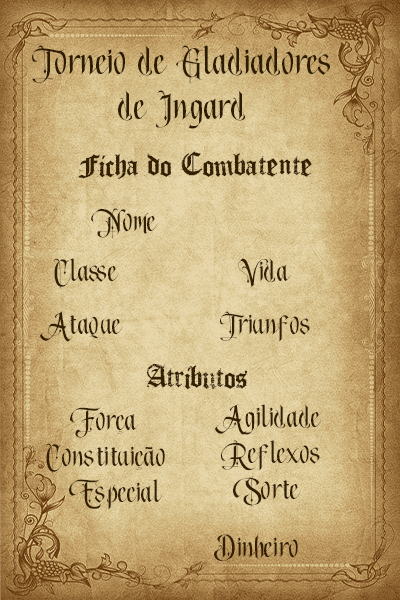
<style>
.page{position:relative;width:400px;height:600px}
.page>*{position:absolute;margin:0}
.t1{font:38px "Songofcoronos";color:#2e1c01}
.t2{font:30px "Faith-Collapsing";color:#342000}
.t3{font:30px "Songofcoronos";color:#342000}
</style>
<div class="page">
<p class="t1" style="left:32px;top:45px;width:298px;height:84px;text-align:center">Torneio de Gladiadores de Ingard</p>
<p class="t2" style="left:78px;top:151px;width:234px;height:28px">Ficha do Combatente</p>
<p class="t3" style="left:91px;top:208px;width:67px;height:31px">Nome</p>
<p class="t3" style="left:54px;top:258px;width:65px;height:31px">Classe</p>
<p class="t3" style="left:238px;top:258px;width:53px;height:30px">Vida</p>
<p class="t3" style="left:40px;top:311px;width:83px;height:31px">Ataque</p>
<p class="t3" style="left:220px;top:311px;width:90px;height:31px">Triunfos</p>
<p class="t2" style="left:145px;top:363px;width:103px;height:27px">Atributos</p>
<p class="t3" style="left:70px;top:407px;width:69px;height:31px">Força</p>
<p class="t3" style="left:215px;top:404px;width:107px;height:31px">Agilidade</p>
<p class="t3" style="left:46px;top:443px;width:119px;height:31px">Constituição</p>
<p class="t3" style="left:221px;top:440px;width:99px;height:31px">Reflexos</p>
<p class="t3" style="left:69px;top:479px;width:93px;height:31px">Especial</p>
<p class="t3" style="left:233px;top:476px;width:68px;height:31px">Sorte</p>
<p class="t3" style="left:214px;top:534px;width:84px;height:27px">Dinheiro</p>
</div>
